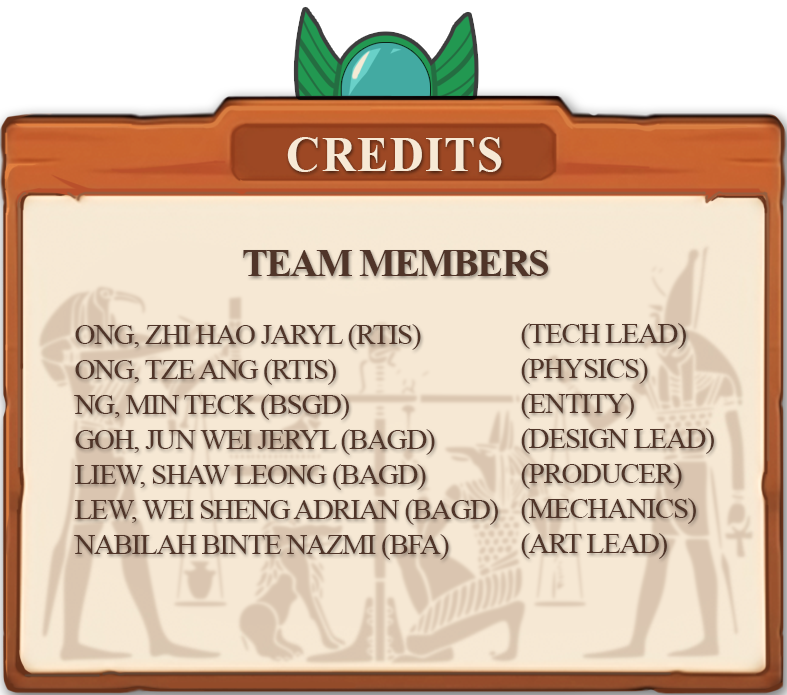
<style>
.page{position:relative;width:787px;height:695px}
.page>*{position:absolute;margin:0}
.t1{font:50px "TimesNewRomanPS-BoldMT";letter-spacing:0.02em;color:#f7e9d5;scale:0.95 1}
.t2{font:39.2px "TimesNewRomanPS-BoldMT";letter-spacing:-0.04em;color:#503529}
.t3{font:29.2px "TimesNewRomanPSMT";letter-spacing:-0.04em;color:#503529}
</style>
<div class="page">
<p class="t1" style="left:287px;top:137px;width:215px;height:35px">CREDITS</p>
<p class="t2" style="left:243px;top:250px;width:305px;height:26px">TEAM MEMBERS</p>
<p class="t3" style="left:74px;top:324px;width:424px;height:236px">ONG, ZHI HAO JARYL (RTIS)<br>ONG, TZE ANG (RTIS)<br>NG, MIN TECK (BSGD)<br>GOH, JUN WEI JERYL (BAGD)<br>LIEW, SHAW LEONG (BAGD)<br>LEW, WEI SHENG ADRIAN (BAGD)<br>NABILAH BINTE NAZMI (BFA)</p>
<p class="t3" style="left:521px;top:323px;width:193px;height:236px">(TECH LEAD)<br>(PHYSICS)<br>(ENTITY)<br>(DESIGN LEAD)<br>(PRODUCER)<br>(MECHANICS)<br>(ART LEAD)</p>
</div>
